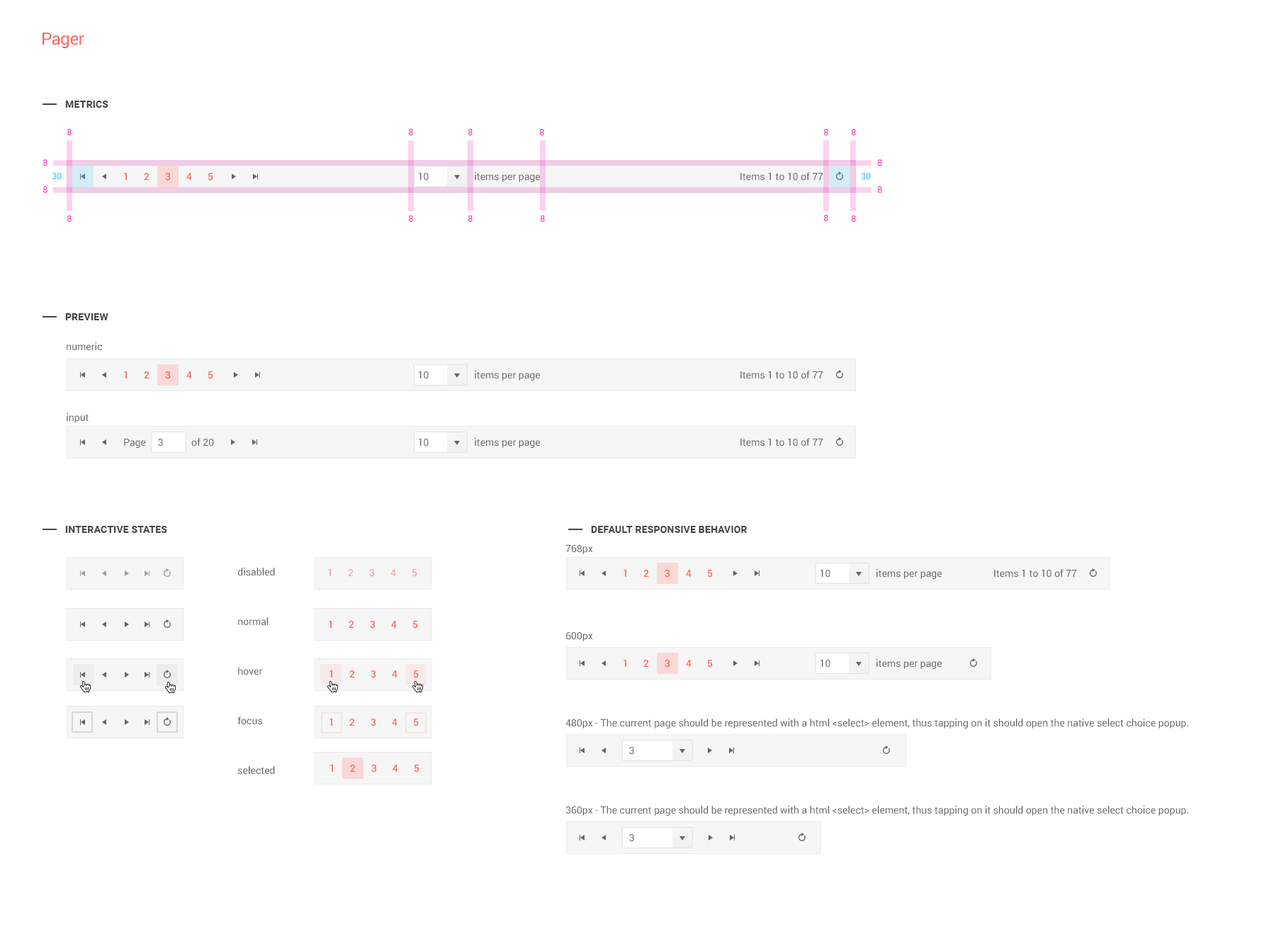
<style>
.page{position:relative;width:1276px;height:934px;background:#ffffff}
.page>*{position:absolute;margin:0}
.t1{font:17px "Roboto-Regular";letter-spacing:-0.025em;color:#ff6358}
.t2{font:9.9px "Roboto-Bold";letter-spacing:0.01em;color:#454545;text-transform:uppercase}
.t3{font:8.5px "Roboto-Regular";letter-spacing:0.01em;color:#f23abc;text-transform:uppercase}
.t4{font:8.5px "Roboto-Regular";letter-spacing:0.01em;color:#46c5fa;text-transform:uppercase}
.t5{font:9.9px "Roboto-Medium";color:#ff6358}
.t6{font:9.9px "Roboto-Regular";color:#656565}
.t7{font:9.9px/75.1px "Roboto-Regular";color:#656565}
.t8{font:9.9px/87.2px "Roboto-Regular";color:#656565}
.t9{font:9.9px/49.6px "Roboto-Regular";color:#656565}
.t10{font:9.9px "Roboto-Medium";color:#fba7a3}
</style>
<div class="page">
<p class="t1" style="left:43px;top:33px;width:41px;height:15px">Pager</p>
<p class="t2" style="left:65px;top:101px;width:43px;height:7px">Metrics</p>
<p class="t3" style="left:67px;top:129px;width:5px;height:6px">8</p>
<p class="t3" style="left:409px;top:129px;width:4px;height:6px">8</p>
<p class="t3" style="left:468px;top:129px;width:5px;height:6px">8</p>
<p class="t3" style="left:540px;top:129px;width:4px;height:6px">8</p>
<p class="t3" style="left:824px;top:129px;width:5px;height:6px">8</p>
<p class="t3" style="left:852px;top:129px;width:4px;height:6px">8</p>
<p class="t3" style="left:43px;top:159px;width:4px;height:7px">8</p>
<p class="t3" style="left:878px;top:159px;width:4px;height:7px">8</p>
<p class="t4" style="left:52px;top:173px;width:10px;height:6px">30</p>
<p class="t5" style="left:124px;top:173px;width:3px;height:7px">1</p>
<p class="t5" style="left:144px;top:173px;width:6px;height:7px">2</p>
<p class="t5" style="left:165px;top:173px;width:6px;height:8px">3</p>
<p class="t5" style="left:186px;top:173px;width:6px;height:7px">4</p>
<p class="t5" style="left:208px;top:173px;width:5px;height:8px">5</p>
<p class="t6" style="left:419px;top:173px;width:10px;height:8px">10</p>
<p class="t6" style="left:475px;top:172px;width:65px;height:10px">items per page</p>
<p class="t6" style="left:741px;top:172px;width:83px;height:9px">Items 1 to 10 of 77</p>
<p class="t4" style="left:862px;top:173px;width:9px;height:6px">30</p>
<p class="t3" style="left:43px;top:186px;width:4px;height:7px">8</p>
<p class="t3" style="left:878px;top:186px;width:4px;height:7px">8</p>
<p class="t3" style="left:67px;top:215px;width:5px;height:7px">8</p>
<p class="t3" style="left:409px;top:215px;width:4px;height:7px">8</p>
<p class="t3" style="left:468px;top:215px;width:5px;height:7px">8</p>
<p class="t3" style="left:541px;top:215px;width:4px;height:7px">8</p>
<p class="t3" style="left:824px;top:215px;width:5px;height:6px">8</p>
<p class="t3" style="left:852px;top:215px;width:4px;height:7px">8</p>
<p class="t2" style="left:65px;top:313px;width:43px;height:7px">preview</p>
<p class="t6" style="left:67px;top:342px;width:35px;height:9px">numeric</p>
<p class="t5" style="left:124px;top:371px;width:3px;height:7px">1</p>
<p class="t5" style="left:144px;top:371px;width:6px;height:7px">2</p>
<p class="t5" style="left:165px;top:371px;width:6px;height:8px">3</p>
<p class="t5" style="left:186px;top:371px;width:6px;height:7px">4</p>
<p class="t5" style="left:208px;top:371px;width:5px;height:8px">5</p>
<p class="t6" style="left:419px;top:371px;width:10px;height:8px">10</p>
<p class="t6" style="left:475px;top:371px;width:65px;height:10px">items per page</p>
<p class="t6" style="left:741px;top:371px;width:83px;height:8px">Items 1 to 10 of 77</p>
<p class="t6" style="left:67px;top:413px;width:22px;height:10px">input</p>
<p class="t6" style="left:124px;top:439px;width:22px;height:9px">Page</p>
<p class="t6" style="left:158px;top:439px;width:5px;height:8px">3</p>
<p class="t6" style="left:191px;top:438px;width:23px;height:9px">of 20</p>
<p class="t6" style="left:419px;top:439px;width:10px;height:8px">10</p>
<p class="t6" style="left:475px;top:438px;width:65px;height:10px">items per page</p>
<p class="t6" style="left:741px;top:438px;width:83px;height:9px">Items 1 to 10 of 77</p>
<p class="t2" style="left:65px;top:526px;width:102px;height:7px">interactive states</p>
<p class="t2" style="left:591px;top:526px;width:157px;height:7px">default responsive behavior</p>
<p class="t7" style="left:566px;top:545px;width:623px;height:271px"><span class="t8">768px<br>600px<br>480px - </span>The current page should be represented with a html &lt;select&gt; element, thus tapping on it should open the native select choice popup.<br><span class="t8">360px - </span>The current page should be represented with a html &lt;select&gt; element, thus tapping on it should open the native select choice popup.</p>
<p class="t9" style="left:237px;top:568px;width:38px;height:207px">disabled<br>normal<br>hover<br>focus<br>selected</p>
<p class="t10" style="left:328px;top:569px;width:3px;height:7px">1</p>
<p class="t10" style="left:348px;top:569px;width:6px;height:7px">2</p>
<p class="t10" style="left:369px;top:569px;width:6px;height:8px">3</p>
<p class="t10" style="left:391px;top:569px;width:5px;height:7px">4</p>
<p class="t10" style="left:413px;top:569px;width:4px;height:8px">5</p>
<p class="t5" style="left:624px;top:570px;width:3px;height:7px">1</p>
<p class="t5" style="left:644px;top:570px;width:5px;height:7px">2</p>
<p class="t5" style="left:665px;top:570px;width:5px;height:8px">3</p>
<p class="t5" style="left:686px;top:570px;width:6px;height:7px">4</p>
<p class="t5" style="left:708px;top:570px;width:5px;height:8px">5</p>
<p class="t6" style="left:821px;top:570px;width:10px;height:8px">10</p>
<p class="t6" style="left:877px;top:569px;width:65px;height:10px">items per page</p>
<p class="t6" style="left:994px;top:569px;width:83px;height:9px">Items 1 to 10 of 77</p>
<p class="t5" style="left:329px;top:621px;width:3px;height:7px">1</p>
<p class="t5" style="left:349px;top:621px;width:5px;height:7px">2</p>
<p class="t5" style="left:370px;top:621px;width:6px;height:8px">3</p>
<p class="t5" style="left:391px;top:621px;width:6px;height:7px">4</p>
<p class="t5" style="left:413px;top:621px;width:5px;height:8px">5</p>
<p class="t5" style="left:624px;top:660px;width:3px;height:7px">1</p>
<p class="t5" style="left:644px;top:660px;width:5px;height:7px">2</p>
<p class="t5" style="left:665px;top:660px;width:5px;height:8px">3</p>
<p class="t5" style="left:686px;top:660px;width:6px;height:7px">4</p>
<p class="t5" style="left:708px;top:660px;width:5px;height:8px">5</p>
<p class="t6" style="left:821px;top:660px;width:10px;height:8px">10</p>
<p class="t6" style="left:877px;top:659px;width:65px;height:10px">items per page</p>
<p class="t5" style="left:330px;top:670px;width:2px;height:8px">1</p>
<p class="t5" style="left:349px;top:670px;width:6px;height:8px">2</p>
<p class="t5" style="left:371px;top:670px;width:5px;height:8px">3</p>
<p class="t5" style="left:392px;top:670px;width:6px;height:8px">4</p>
<p class="t5" style="left:414px;top:670px;width:5px;height:8px">5</p>
<p class="t5" style="left:330px;top:719px;width:2px;height:7px">1</p>
<p class="t5" style="left:349px;top:719px;width:6px;height:7px">2</p>
<p class="t5" style="left:371px;top:719px;width:5px;height:7px">3</p>
<p class="t5" style="left:392px;top:719px;width:6px;height:7px">4</p>
<p class="t5" style="left:414px;top:719px;width:5px;height:7px">5</p>
<p class="t6" style="left:629px;top:747px;width:5px;height:8px">3</p>
<p class="t5" style="left:330px;top:765px;width:3px;height:7px">1</p>
<p class="t5" style="left:350px;top:765px;width:6px;height:7px">2</p>
<p class="t5" style="left:371px;top:765px;width:6px;height:8px">3</p>
<p class="t5" style="left:393px;top:765px;width:5px;height:7px">4</p>
<p class="t5" style="left:415px;top:765px;width:5px;height:8px">5</p>
<p class="t6" style="left:629px;top:834px;width:5px;height:8px">3</p>
</div>
